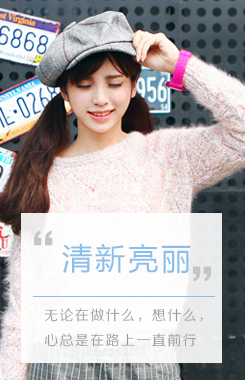
<style>
.page{position:relative;width:245px;height:380px}
.page>*{position:absolute;margin:0}
.t1{font:30px "MicrosoftYaHei";letter-spacing:0.1em;color:#8cbeeb}
.t2{font:14px "FZZXHJW--GB1-0";letter-spacing:0.1em;color:#999999}
</style>
<div class="page">
<p class="t1" style="left:62px;top:243px;width:129px;height:31px">清新亮丽</p>
<p class="t2" style="left:44px;top:308px;width:159px;height:39px">无论在做什么，想什么，<br>心总是在路上一直前行</p>
</div>
